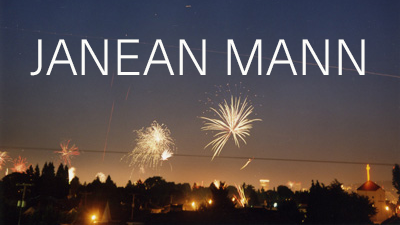
<style>
.page{position:relative;width:400px;height:225px}
.page>*{position:absolute;margin:0}
.t1{font:50px "NeueHaasUnicaW1G-Light";letter-spacing:0.02em;color:#fbfbf9;text-transform:uppercase;scale:0.95 1}
</style>
<div class="page">
<p class="t1" style="left:30px;top:39px;width:335px;height:37px">Janean mann</p>
</div>
